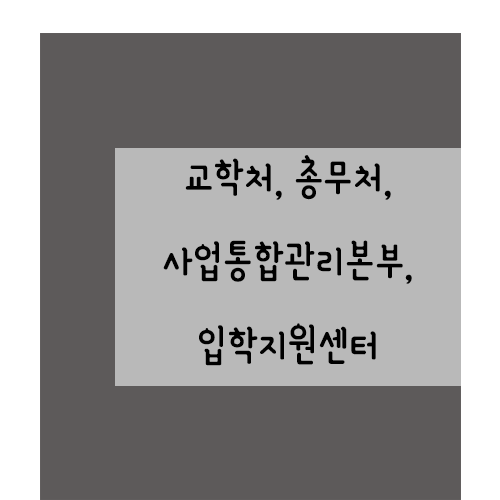
<style>
.page{position:relative;width:500px;height:500px;background:#5d5a5a}
.page>*{position:absolute;margin:0}
.t1{font:48px "YanoljaYacheR";color:#000000}
</style>
<div class="page">
<p class="t1" style="left:163px;top:155px;width:249px;height:211px;text-align:center">교학처, 총무처, <br>사업통합관리본부,<br>입학지원센터</p>
</div>
